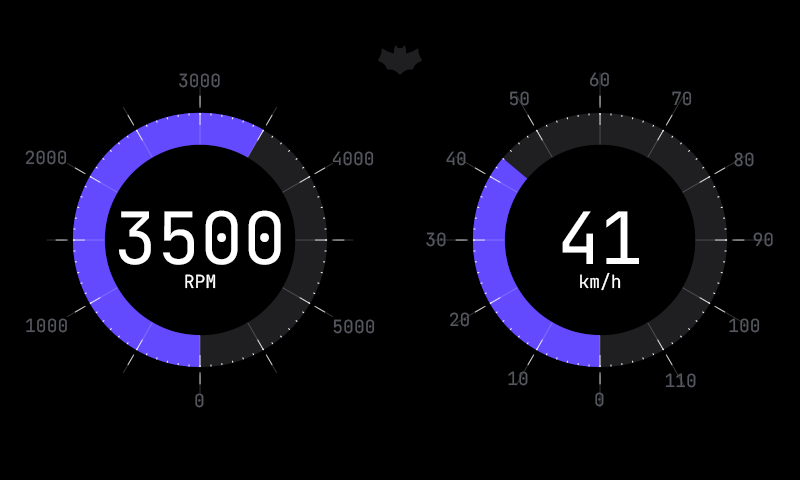
<style>
.page{position:relative;width:800px;height:480px;background:#000000}
.page>*{position:absolute;margin:0}
.t1{font:18px "JetBrainsMono-Regular";color:#56575e}
.t2{font:254px "upirgauge_font_normal"}
.t3{font:254px "upirgauge_font_normal";color:#644aff}
.t4{font:72px "JetBrainsMono-Regular";color:#ffffff}
.t5{font:18px "JetBrainsMono-Regular";color:#ffffff}
</style>
<div class="page">
<p class="t1" style="left:179px;top:73px;width:41px;height:15px">3000</p>
<p class="t1" style="left:179px;top:73px;width:41px;height:15px">3000</p>
<p class="t1" style="left:589px;top:72px;width:20px;height:15px">60</p>
<p class="t1" style="left:589px;top:72px;width:20px;height:15px">60</p>
<p class="t1" style="left:510px;top:91px;width:19px;height:15px">50</p>
<p class="t1" style="left:510px;top:91px;width:19px;height:15px">50</p>
<p class="t1" style="left:672px;top:91px;width:20px;height:15px">70</p>
<p class="t1" style="left:672px;top:91px;width:20px;height:15px">70</p>
<p class="t2" style="left:73px;top:112px;width:254px;height:255px">o</p>
<p class="t3" style="left:73px;top:112px;width:191px;height:255px">Q</p>
<p class="t2" style="left:473px;top:112px;width:254px;height:255px">o</p>
<p class="t1" style="left:25px;top:150px;width:42px;height:15px">2000</p>
<p class="t1" style="left:25px;top:150px;width:42px;height:15px">2000</p>
<p class="t1" style="left:332px;top:151px;width:42px;height:15px">4000</p>
<p class="t1" style="left:332px;top:151px;width:42px;height:15px">4000</p>
<p class="t1" style="left:446px;top:151px;width:20px;height:15px">40</p>
<p class="t1" style="left:446px;top:151px;width:20px;height:15px">40</p>
<p class="t3" style="left:473px;top:158px;width:127px;height:209px">A</p>
<p class="t1" style="left:734px;top:152px;width:20px;height:15px">80</p>
<p class="t1" style="left:734px;top:152px;width:20px;height:15px">80</p>
<p class="t4" style="left:119px;top:210px;width:162px;height:55px">8888</p>
<p class="t4" style="left:119px;top:210px;width:162px;height:55px">3500</p>
<p class="t4" style="left:562px;top:211px;width:77px;height:53px">41</p>
<p class="t1" style="left:426px;top:232px;width:20px;height:15px">30</p>
<p class="t1" style="left:426px;top:232px;width:20px;height:15px">30</p>
<p class="t1" style="left:753px;top:232px;width:20px;height:15px">90</p>
<p class="t1" style="left:753px;top:232px;width:20px;height:15px">90</p>
<p class="t5" style="left:185px;top:274px;width:31px;height:15px">RPM</p>
<p class="t5" style="left:185px;top:274px;width:31px;height:15px">RPM</p>
<p class="t5" style="left:580px;top:272px;width:41px;height:19px">km/h</p>
<p class="t5" style="left:580px;top:272px;width:41px;height:19px">km/h</p>
<p class="t1" style="left:26px;top:318px;width:41px;height:15px">1000</p>
<p class="t1" style="left:26px;top:318px;width:41px;height:15px">1000</p>
<p class="t1" style="left:450px;top:312px;width:19px;height:15px">20</p>
<p class="t1" style="left:450px;top:312px;width:19px;height:15px">20</p>
<p class="t1" style="left:729px;top:318px;width:31px;height:15px">100</p>
<p class="t1" style="left:729px;top:318px;width:31px;height:15px">100</p>
<p class="t1" style="left:333px;top:319px;width:42px;height:15px">5000</p>
<p class="t1" style="left:333px;top:319px;width:42px;height:15px">5000</p>
<p class="t1" style="left:508px;top:371px;width:20px;height:15px">10</p>
<p class="t1" style="left:508px;top:371px;width:20px;height:15px">10</p>
<p class="t1" style="left:665px;top:373px;width:31px;height:15px">110</p>
<p class="t1" style="left:665px;top:373px;width:31px;height:15px">110</p>
<p class="t1" style="left:195px;top:393px;width:9px;height:15px">0</p>
<p class="t1" style="left:195px;top:393px;width:9px;height:15px">0</p>
<p class="t1" style="left:595px;top:392px;width:9px;height:15px">0</p>
<p class="t1" style="left:595px;top:392px;width:9px;height:15px">0</p>
</div>
